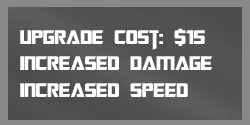
<style>
.page{position:relative;width:250px;height:125px}
.page>*{position:absolute;margin:0}
.t1{font:22px "TransformersMovie";color:#ffffff}
</style>
<div class="page">
<p class="t1" style="left:20px;top:28px;width:192px;height:69px">upgrade cost: $15<br>increased damage<br>increased speed</p>
</div>
